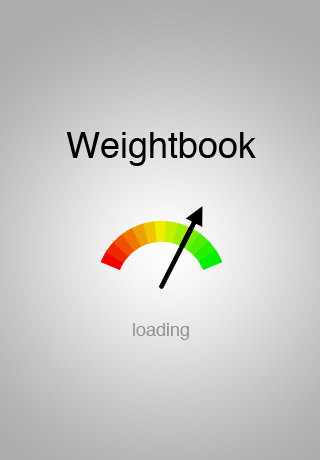
<style>
.page{position:relative;width:320px;height:460px}
.page>*{position:absolute;margin:0}
.t1{font:36px "Helvetica";color:#000000}
.t2{font:18px "Helvetica";color:#939090}
</style>
<div class="page">
<p class="t1" style="left:66px;top:132px;width:190px;height:34px">Weightbook</p>
<p class="t2" style="left:133px;top:323px;width:56px;height:17px">loading</p>
</div>
